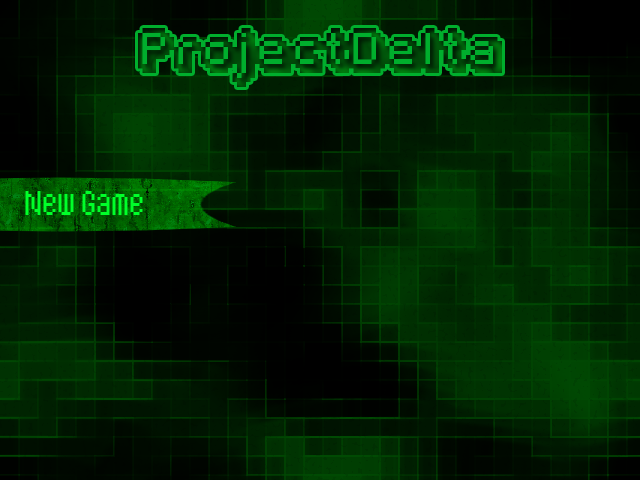
<style>
.page{position:relative;width:640px;height:480px}
.page>*{position:absolute;margin:0}
.t1{font:36px "Fipps"}
.t2{font:30px "MDThaitypeA";color:#00ff2a}
</style>
<div class="page">
<p class="t1" style="left:138px;top:28px;width:364px;height:59px">ProjectDelta</p>
<p class="t2" style="left:25px;top:191px;width:118px;height:24px">New Game</p>
</div>
